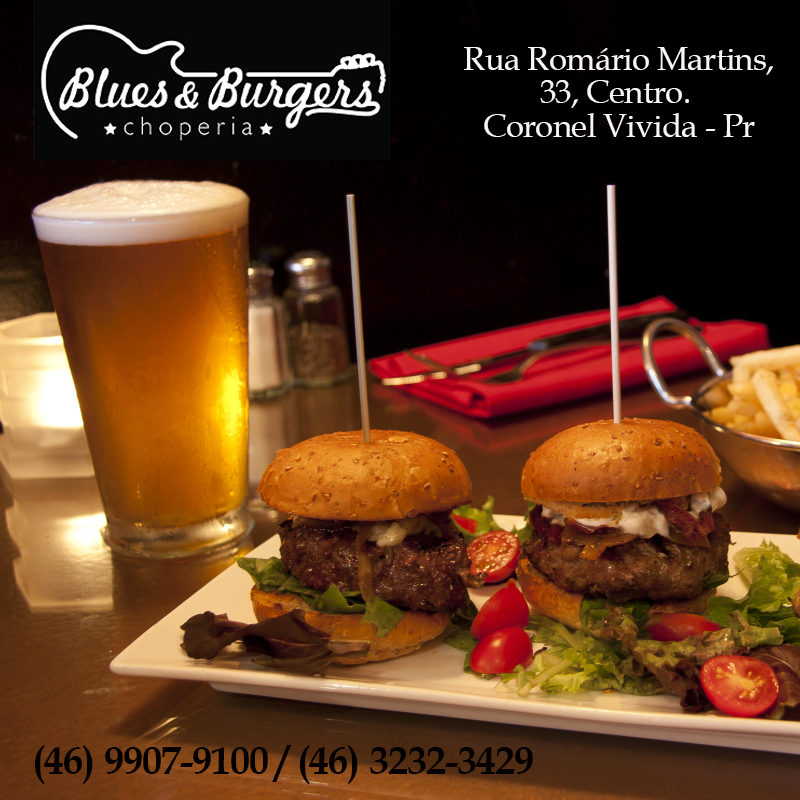
<style>
.page{position:relative;width:800px;height:800px}
.page>*{position:absolute;margin:0}
.t1{font:33.3px/33.3px "BookAntiqua";letter-spacing:-0.025em;color:#faf6f6}
.t2{font:40px "BookAntiqua-Bold";letter-spacing:-0.025em;color:#050000}
</style>
<div class="page">
<p class="t1" style="left:464px;top:47px;width:309px;height:90px;text-align:center">Rua Romário Martins,<br>33, Centro. <br>Coronel Vivida - Pr</p>
<p class="t2" style="left:34px;top:745px;width:499px;height:39px">(46) 9907-9100 / (46) 3232-3429</p>
</div>
